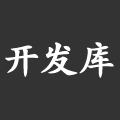
<style>
.page{position:relative;width:120px;height:120px;background:#333333}
.page>*{position:absolute;margin:0}
.t1{font:37.5px "STKaitiSC-Black";letter-spacing:0.02em;color:#ffffff}
</style>
<div class="page">
<p class="t1" style="left:5px;top:42px;width:109px;height:36px">开发库</p>
</div>
